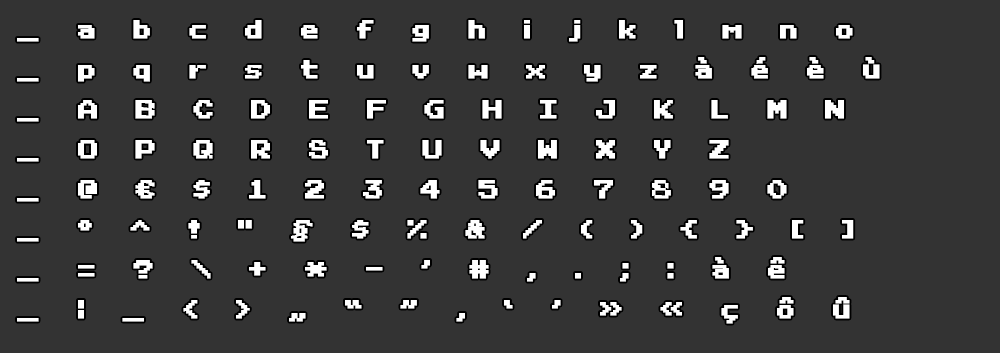
<style>
.page{position:relative;width:1000px;height:353px;background:#333333}
.page>*{position:absolute;margin:0}
.t1{font:26px/40px "RetroVilleNC";letter-spacing:1.3em;color:#ffffff;font-weight:bold}
</style>
<div class="page">
<p class="t1" style="left:17px;top:20px;width:863px;height:304px">_abcdefghijklmno<br>_pqrstuvwxyzàéèù<br>_ABCDEFGHIJKLMN<br>_OPQRSTUVWXYZ<br>_@€$1234567890<br>_°^!"§$%&amp;/(){}[]<br>_=?\+*-'#,.;:àê<br>_|_&lt;&gt;„“”‚‘’»«çôû</p>
</div>
